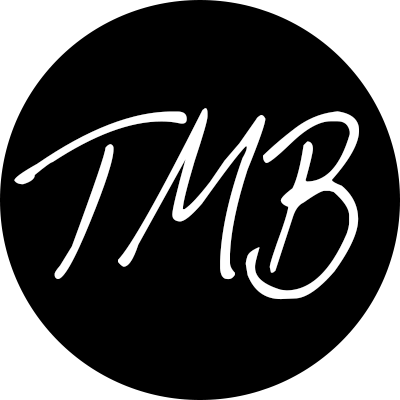
<style>
.page{position:relative;width:400px;height:400px;background:#000000}
.page>*{position:absolute;margin:0}
.t1{font:180px "MyBoyfriend'sHandwriting";color:#ffffff}
</style>
<div class="page">
<p class="t1" style="left:14px;top:108px;width:345px;height:192px">TMB</p>
</div>
